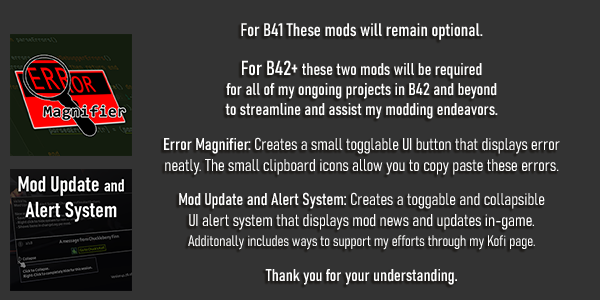
<style>
.page{position:relative;width:600px;height:300px;background:#333333}
.page>*{position:absolute;margin:0}
.t1{font:17px "Bahnschrift-Condensed";color:#ffffff;font-weight:bold}
.t2{font:18px "Bahnschrift-Condensed";color:#ffffff;font-weight:bold}
.t3{font:12px "Bahnschrift-Condensed";color:#ffffff;font-weight:bold}
.t4{font:20px "Bahnschrift-Condensed";color:#ffffff;font-weight:bold}
.t5{font:17px "Bahnschrift-LightCondensed";color:#ffffff;font-weight:bold}
.t6{font:15px/20px "Bahnschrift-LightCondensed";color:#ffffff;font-weight:bold}
</style>
<div class="page">
<p class="t1" style="left:164px;top:23px;width:396px;height:262px;text-align:center"><span class="t2">For B41 These mods will remain optional.<br></span><span class="t3"> <br></span><span class="t4">For B42+ </span>these two mods will be required <br>for all of my ongoing projects in B42 and beyond <br>to streamline and assist my modding endeavors.<br> <br>Error Magnifier: <span class="t5">Creates a small togglable UI button that displays error neatly. The small clipboard icons allow you to copy paste these errors.<br>  <br></span>Mod Update and Alert System: <span class="t5">Creates a toggable and collapsible <br>UI alert system that displays mod news and updates in-game. <br></span><span class="t6">Additonally includes ways to support my efforts through my Kofi page.<br> <br></span>Thank you for your understanding.</p>
</div>
